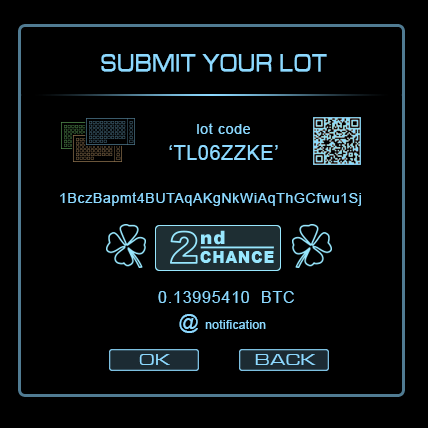
<style>
.page{position:relative;width:428px;height:428px;background:#000000}
.page>*{position:absolute;margin:0}
.t1{font:26px "MicrogrammaD-MediExte";letter-spacing:0.075em;color:#8dd9ff;font-weight:bold;scale:0.7 1}
.t2{font:14.1px "ArialMT";letter-spacing:0.05em;color:#8dd9ff}
.t3{font:20px "ArialMT";letter-spacing:0.025em;color:#8dd9ff}
.t4{font:14px "ArialMT";letter-spacing:0.05em;color:#8dd9ff}
.t5{font:16px "ArialMT";letter-spacing:0.05em;color:#8dd9ff}
.t6{font:12px "ArialMT";letter-spacing:0.025em;color:#8dd9ff}
.t7{font:16px "MicrogrammaD-MediExte";letter-spacing:0.075em;color:#8dd9ff}
</style>
<div class="page">
<p class="t1" style="left:101px;top:54px;width:226px;height:18px">SUBMIT YOUR LOT</p>
<p class="t2" style="left:197px;top:123px;width:53px;height:11px">lot code</p>
<p class="t3" style="left:169px;top:145px;width:109px;height:15px">‘TL06ZZKE’</p>
<p class="t4" style="left:60px;top:192px;width:301px;height:14px">1BczBapmt4BUTAqAKgNkWiAqThGCfwu1Sj</p>
<p class="t5" style="left:158px;top:291px;width:136px;height:12px">0.13995410  BTC</p>
<p class="t6" style="left:179px;top:314px;width:87px;height:19px"><span class="t3">@ </span>notification</p>
<p class="t7" style="left:139px;top:354px;width:31px;height:11px">OK</p>
<p class="t7" style="left:255px;top:354px;width:61px;height:11px">BACK</p>
</div>
